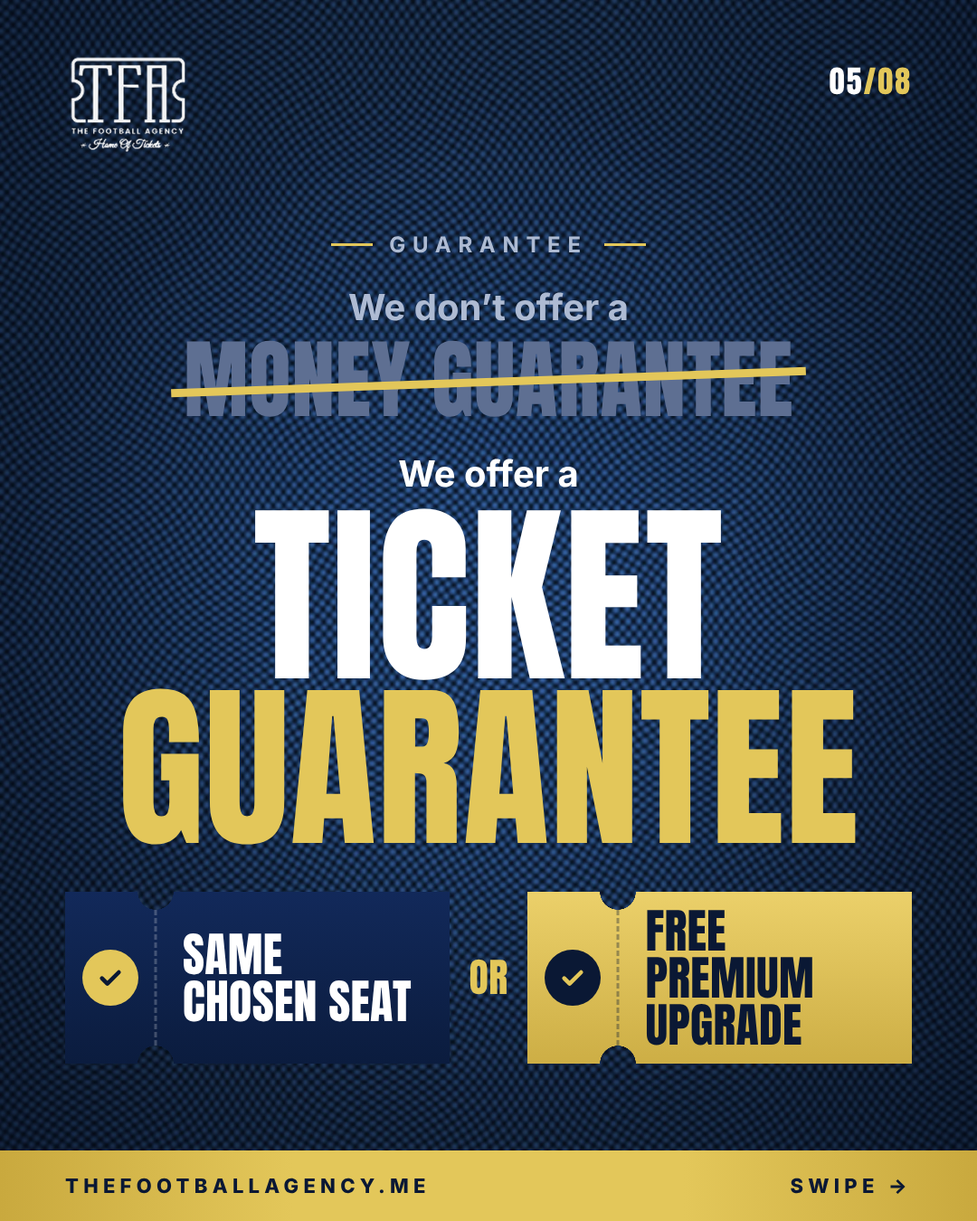
<style>
.page{position:relative;width:977px;height:1221px}
.page>*{position:absolute;margin:0}
.t1{font:30.7px "Anton-Regular";letter-spacing:0.06em;color:#e3c75a}
.t2{font:30.7px "Anton-Regular";letter-spacing:0.06em;color:#ffffff}
.t3{font:21.7px "Inter-Bold";letter-spacing:0.32em;color:#aebbd3}
.t4{font:36.2px "Inter-Bold";color:#aebbd3}
.t5{font:86.8px "Anton-Regular";letter-spacing:0.005em;color:#5e6f92}
.t6{font:36.2px "Inter-Bold";color:#ffffff}
.t7{font:195.5px "Anton-Regular";letter-spacing:0.005em;color:#ffffff}
.t8{font:177.9px "Anton-Regular";letter-spacing:0.005em;color:#e3c75a}
.t9{font:47px/47px "Anton-Regular";letter-spacing:0.005em;color:#0a1834}
.t10{font:47px/47px "Anton-Regular";letter-spacing:0.005em;color:#ffffff}
.t11{font:39.8px "Anton-Regular";letter-spacing:0.005em;color:#e3c75a}
.t12{font:19.9px "Inter-ExtraBold";letter-spacing:0.24em;color:#0a1834}
</style>
<div class="page">
<p class="t1" style="left:829px;top:67px;width:81px;height:28px"><span class="t2">05</span>/08</p>
<p class="t3" style="left:390px;top:236px;width:190px;height:17px">GUARANTEE</p>
<p class="t4" style="left:349px;top:292px;width:278px;height:29px">We don’t offer a</p>
<p class="t5" style="left:186px;top:340px;width:605px;height:77px">MONEY GUARANTEE</p>
<p class="t6" style="left:399px;top:459px;width:178px;height:28px">We offer a</p>
<p class="t7" style="left:255px;top:508px;width:466px;height:172px">TICKET</p>
<p class="t8" style="left:123px;top:688px;width:733px;height:157px">GUARANTEE</p>
<p class="t9" style="left:646px;top:910px;width:166px;height:135px">FREE<br>PREMIUM<br>UPGRADE</p>
<p class="t10" style="left:184px;top:933px;width:227px;height:89px">SAME<br>CHOSEN SEAT</p>
<p class="t11" style="left:469px;top:959px;width:38px;height:36px">OR</p>
<p class="t12" style="left:65px;top:1177px;width:360px;height:17px">THEFOOTBALLAGENCY.ME</p>
<p class="t12" style="left:790px;top:1177px;width:115px;height:17px">SWIPE →</p>
</div>
